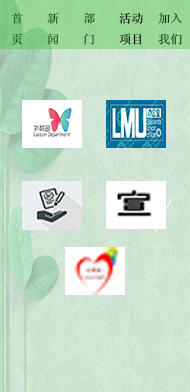
<style>
.page{position:relative;width:190px;height:392px}
.page>*{position:absolute;margin:0}
.t1{font:12px "System"}
.t2{font:12px "System";color:#10410b}
.t3{font:12px "System";color:#000000}
</style>
<div class="page">
<p class="t1" style="left:11px;top:12px;width:12px;height:33px">首<br>页</p>
<p class="t2" style="left:47px;top:12px;width:12px;height:33px">新闻</p>
<p class="t1" style="left:83px;top:12px;width:12px;height:33px">部门</p>
<p class="t3" style="left:119px;top:12px;width:24px;height:33px">活动<br>项目</p>
<p class="t2" style="left:158px;top:12px;width:24px;height:33px">加入<br>我们</p>
</div>
